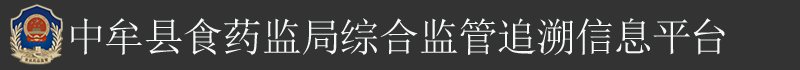
<style>
.page{position:relative;width:800px;height:70px;background:#333333}
.page>*{position:absolute;margin:0}
.t1{font:40px "SimSun";letter-spacing:0.05em;color:#f6f9f9}
</style>
<div class="page">
<p class="t1" style="left:71px;top:18px;width:654px;height:37px">中牟县食药监局综合监管追溯信息平台</p>
</div>
